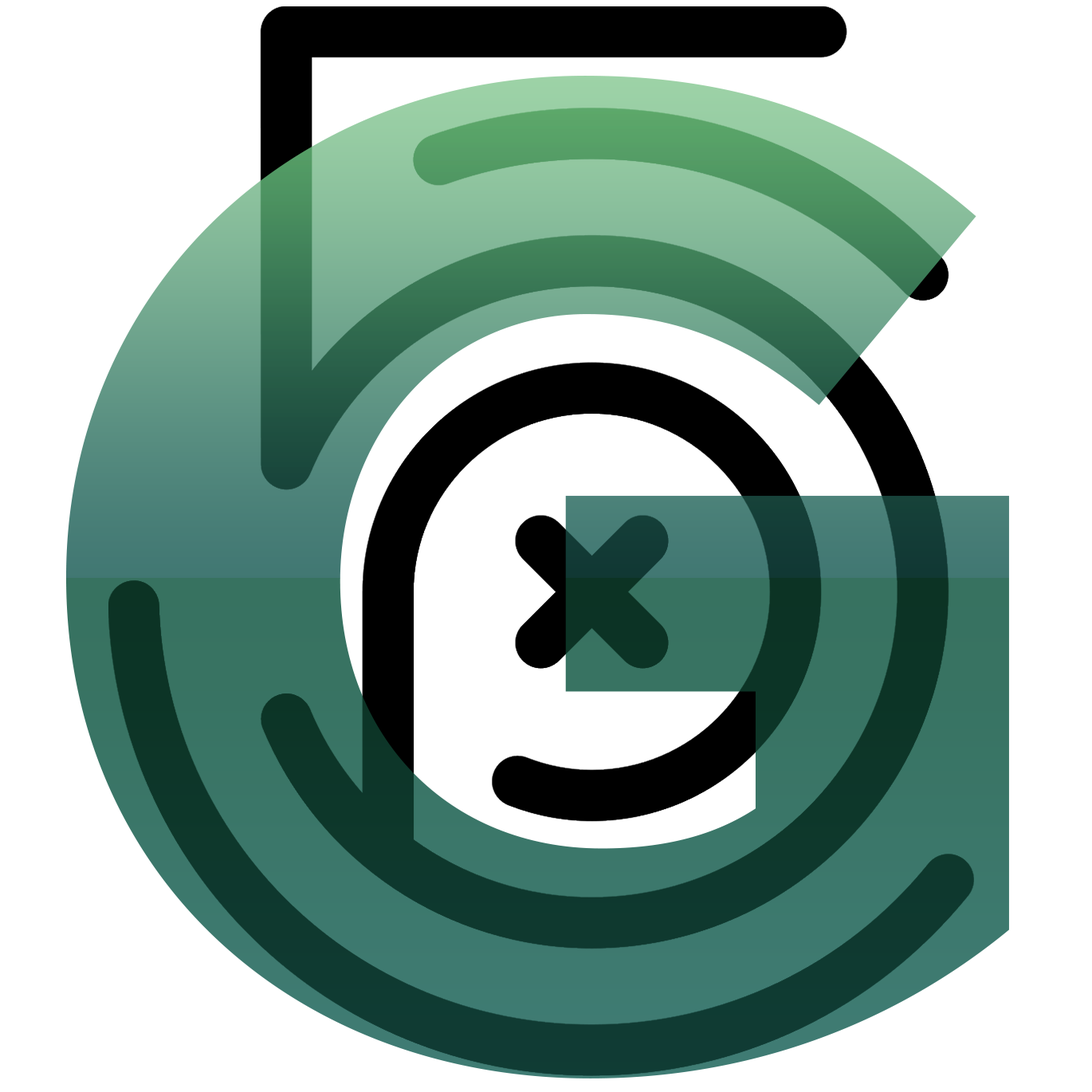
<style>
.page{position:relative;width:1092px;height:1092px;background:#ffffff}
.page>*{position:absolute;margin:0}
.t1{font:1377.3px "GothamPro-Black"}
</style>
<div class="page">
<p class="t1" style="left:66px;top:76px;width:943px;height:1002px">G</p>
</div>
